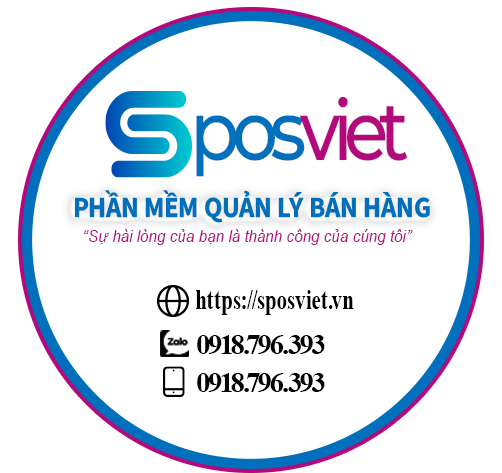
<style>
.page{position:relative;width:502px;height:473px;background:#ffffff}
.page>*{position:absolute;margin:0}
.t1{font:83.3px "MontserratRoman-Medium";letter-spacing:-0.08em;color:#b20a7d;scale:0.87 1}
.t2{font:83.3px "MontserratRoman-Medium";letter-spacing:-0.08em;color:#006fbc;scale:0.87 1}
.t3{font:29.2px "SourceSans3Roman-Bold";color:#006fbc;text-transform:uppercase;scale:0.92 1}
.t4{font:16.7px "Arial-ItalicMT";color:#b20a7d;scale:0.92 1}
.t5{font:29.2px "TimesNewRomanPS-BoldMT";color:#000000;scale:0.71 1}
.t6{font:29.2px "TimesNewRomanPS-BoldMT";letter-spacing:-0.08em;color:#020002}
.t7{font:29.2px "TimesNewRomanPS-BoldMT";letter-spacing:-0.08em;color:#000000}
</style>
<div class="page">
<p class="t1" style="left:196px;top:96px;width:212px;height:81px"><span class="t2">pos</span>viet</p>
<p class="t3" style="left:75px;top:190px;width:355px;height:33px">Phần mềm quản lý bán hàng</p>
<p class="t4" style="left:84px;top:229px;width:329px;height:16px">“Sự hài lòng của bạn là thành công của cúng tôi”</p>
<p class="t5" style="left:196px;top:290px;width:158px;height:25px">https://sposviet.vn</p>
<p class="t6" style="left:197px;top:335px;width:128px;height:19px">0918.796.393</p>
<p class="t7" style="left:197px;top:373px;width:128px;height:19px">0918.796.393</p>
</div>
